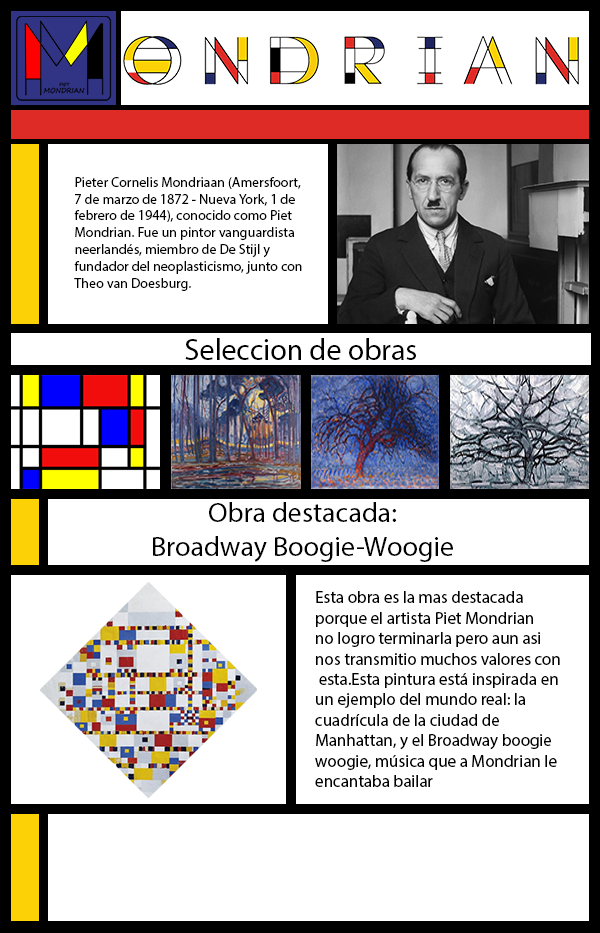
<style>
.page{position:relative;width:600px;height:933px;background:#ffffff}
.page>*{position:absolute;margin:0}
.t1{font:14px "MyriadPro-Regular";color:#000000}
.t2{font:30px "MyriadPro-Regular";color:#000000}
.t3{font:28px "MyriadPro-Regular";color:#000000}
.t4{font:17px "MyriadPro-Regular";color:#000000}
</style>
<div class="page">
<p class="t1" style="left:74px;top:177px;width:228px;height:114px">Pieter Cornelis Mondriaan (Amersfoort, <br>7 de marzo de 1872 - Nueva York, 1 de <br>febrero de 1944), conocido como Piet <br>Mondrian. Fue un pintor vanguardista <br>neerlandés, miembro de De Stijl y <br>fundador del neoplasticismo, junto con <br>Theo van Doesburg.</p>
<p class="t2" style="left:185px;top:338px;width:231px;height:22px">Seleccion de obras</p>
<p class="t3" style="left:153px;top:502px;width:300px;height:60px;text-align:center">Obra destacada:<br>Broadway Boogie-Woogie</p>
<p class="t4" style="left:315px;top:591px;width:245px;height:196px">Esta obra es la mas destacada <br>porque el artista Piet Mondrian <br>no logro terminarla pero aun asi <br>nos transmitio muchos valores con<br> esta.Esta pintura está inspirada en <br>un ejemplo del mundo real: la <br>cuadrícula de la ciudad de <br>Manhattan, y el Broadway boogie <br>woogie, música que a Mondrian le <br>encantaba bailar</p>
</div>
